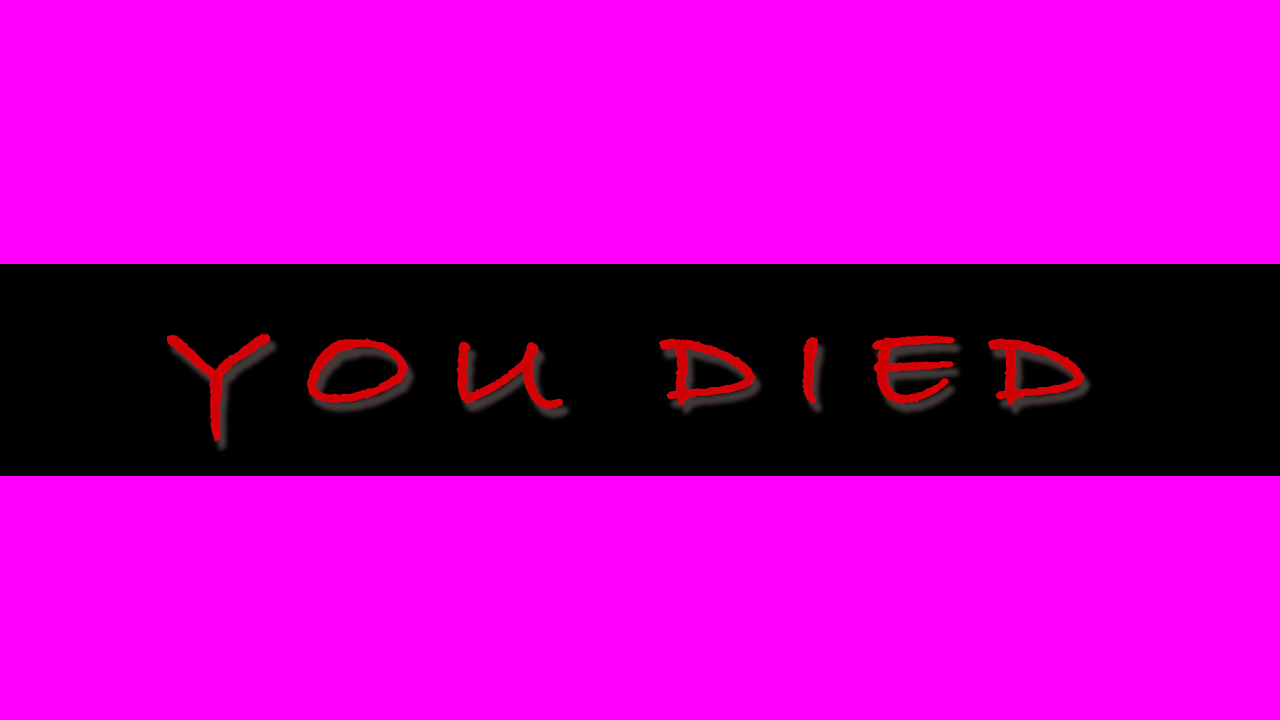
<style>
.page{position:relative;width:1280px;height:720px;background:#ff00ff}
.page>*{position:absolute;margin:0}
.t1{font:117px "BradleyHandITC";letter-spacing:0.16em;color:#c80000;font-weight:bold;scale:1.38 1}
</style>
<div class="page">
<p class="t1" style="left:166px;top:333px;width:919px;height:109px">YOU DIED</p>
</div>
